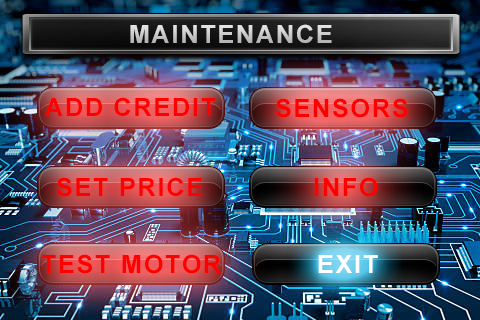
<style>
.page{position:relative;width:480px;height:320px}
.page>*{position:absolute;margin:0}
.t1{font:25px "Arial-BoldMT";letter-spacing:0.075em;color:#dddddd}
.t2{font:25px "Arial-BoldMT";letter-spacing:0.075em;color:#ff0000}
.t3{font:25px "Arial-BoldMT";letter-spacing:0.075em;color:#ffffff}
</style>
<div class="page">
<p class="t1" style="left:130px;top:24px;width:202px;height:19px">MAINTENANCE</p>
<p class="t2" style="left:45px;top:97px;width:171px;height:19px">ADD CREDIT</p>
<p class="t2" style="left:276px;top:98px;width:132px;height:20px">SENSORS</p>
<p class="t2" style="left:57px;top:177px;width:145px;height:20px">SET PRICE</p>
<p class="t2" style="left:314px;top:177px;width:64px;height:20px">INFO</p>
<p class="t2" style="left:41px;top:254px;width:180px;height:20px">TEST MOTOR</p>
<p class="t3" style="left:318px;top:255px;width:60px;height:18px">EXIT</p>
</div>
